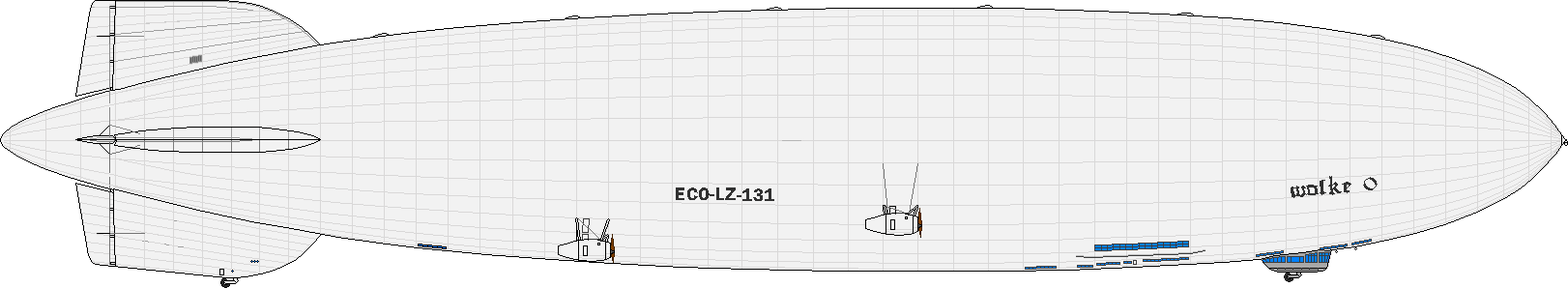
<style>
.page{position:relative;width:1568px;height:288px;background:#f2f2f2}
.page>*{position:absolute;margin:0}
.t1{font:44.6px "GutenbergTextura";letter-spacing:0.025em;color:#313131;scale:1.26 1}
.t2{font:30.9px "FranklinGothic-Demi";letter-spacing:0.025em;color:#313131}
</style>
<div class="page">
<p class="t1" style="left:1291px;top:176px;width:87px;height:22px;rotate:-5deg">wolke 0</p>
<p class="t2" style="left:676px;top:188px;width:98px;height:13px;rotate:1deg">ECO-LZ-131</p>
</div>
